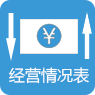
<style>
.page{position:relative;width:95px;height:95px;background:#3998d6}
.page>*{position:absolute;margin:0}
.t1{font:16px "MicrosoftYaHei";color:#ffffff}
</style>
<div class="page">
<p class="t1" style="left:9px;top:67px;width:80px;height:17px">经营情况表</p>
</div>
